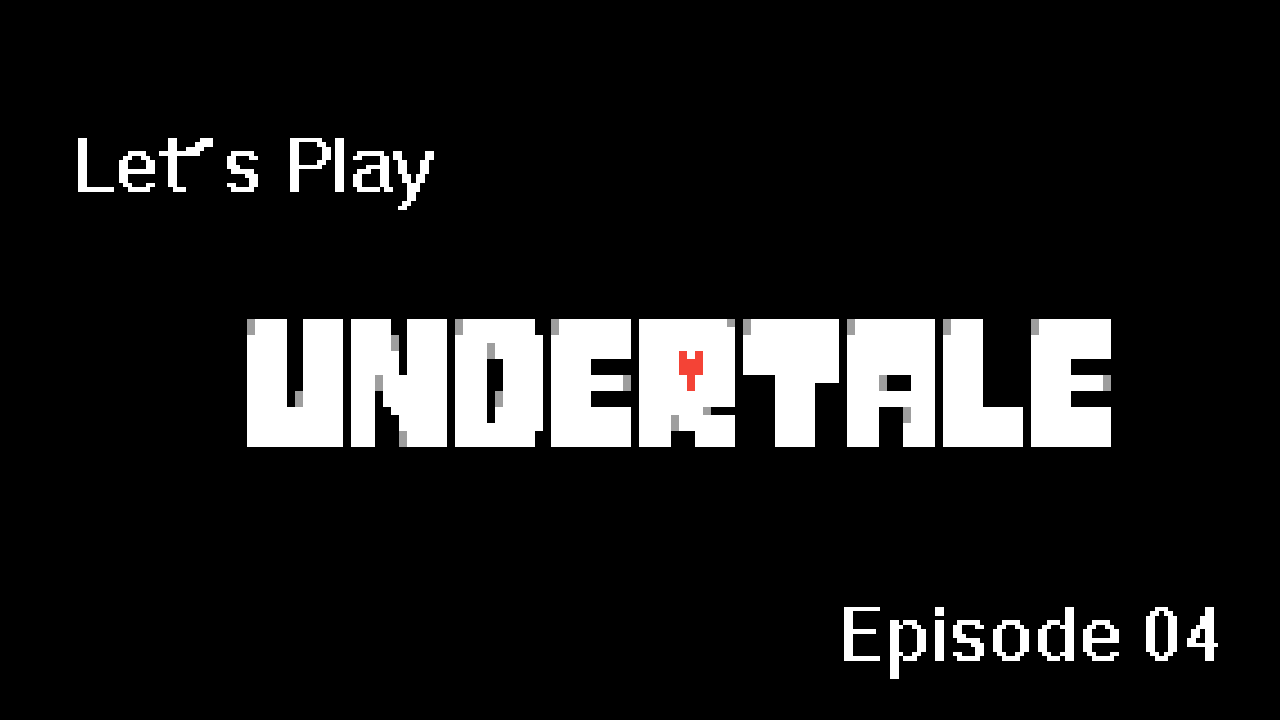
<style>
.page{position:relative;width:1280px;height:720px;background:#000000}
.page>*{position:absolute;margin:0}
.t1{font:72px "System";color:#ffffff}
</style>
<div class="page">
<p class="t1" style="left:78px;top:138px;width:356px;height:72px">Let’s Play</p>
<p class="t1" style="left:844px;top:607px;width:374px;height:72px">Episode 04</p>
</div>
